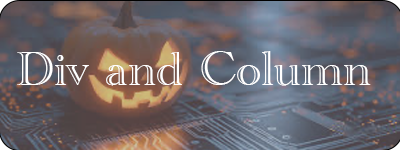
<style>
.page{position:relative;width:400px;height:150px}
.page>*{position:absolute;margin:0}
.t1{font:50px "AcademyEngravedLetPlain";color:#ffffff}
</style>
<div class="page">
<p class="t1" style="left:17px;top:51px;width:354px;height:35px">Div and Column</p>
</div>
